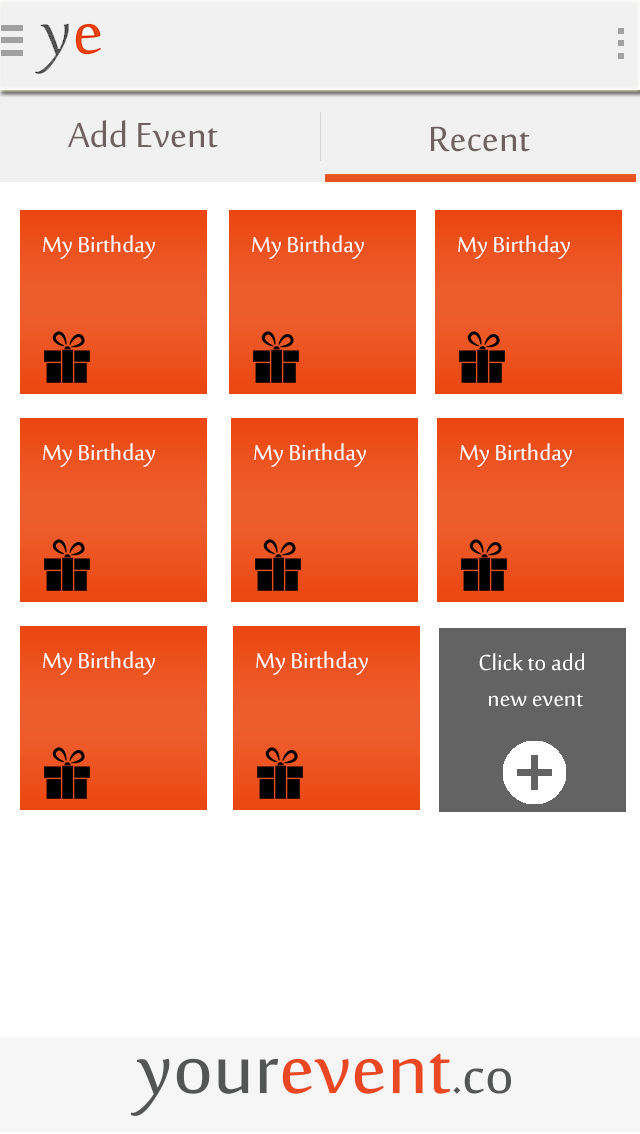
<style>
.page{position:relative;width:640px;height:1134px;background:#ffffff}
.page>*{position:absolute;margin:0}
.t1{font:48px "SakkalMajalla";color:#6d6261}
.t2{font:30px "SakkalMajalla";color:#fefefe}
</style>
<div class="page">
<p class="t1" style="left:68px;top:120px;width:150px;height:28px">Add Event</p>
<p class="t1" style="left:431px;top:126px;width:99px;height:26px">Recent</p>
<p class="t2" style="left:43px;top:235px;width:112px;height:24px">My Birthday</p>
<p class="t2" style="left:252px;top:235px;width:112px;height:24px">My Birthday</p>
<p class="t2" style="left:458px;top:235px;width:112px;height:24px">My Birthday</p>
<p class="t2" style="left:43px;top:443px;width:112px;height:24px">My Birthday</p>
<p class="t2" style="left:254px;top:443px;width:112px;height:24px">My Birthday</p>
<p class="t2" style="left:460px;top:443px;width:112px;height:24px">My Birthday</p>
<p class="t2" style="left:43px;top:651px;width:112px;height:24px">My Birthday</p>
<p class="t2" style="left:256px;top:651px;width:112px;height:24px">My Birthday</p>
<p class="t2" style="left:479px;top:653px;width:105px;height:54px">Click to add <br>      new event</p>
</div>
